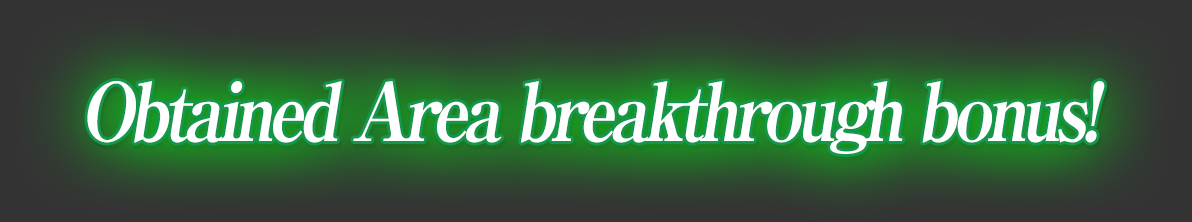
<style>
.page{position:relative;width:1192px;height:222px}
.page>*{position:absolute;margin:0}
.t1{font:80px "RyuminPro-ExBold";letter-spacing:-0.08em;color:#ffffff;font-style:italic;scale:0.9 1}
</style>
<div class="page">
<p class="t1" style="left:87px;top:81px;width:1018px;height:73px">Obtained Area breakthrough bonus!</p>
</div>
